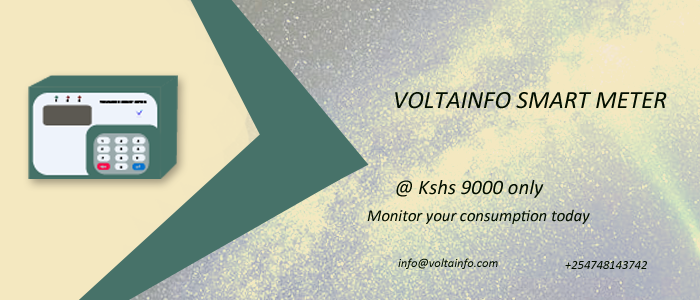
<style>
.page{position:relative;width:700px;height:300px;background:#f4e8c0}
.page>*{position:absolute;margin:0}
.t1{font:25px "Calibri-Italic";color:#030f00}
.t2{font:20.8px "Calibri-Italic";color:#030f00}
.t3{font:16.7px "Calibri-Italic";color:#030f00}
.t4{font:12.5px "Calibri-Italic";color:#030f00}
</style>
<div class="page">
<p class="t1" style="left:395px;top:92px;width:272px;height:17px">VOLTAINFO SMART METER</p>
<p class="t2" style="left:396px;top:180px;width:148px;height:18px">@ Kshs 9000 only</p>
<p class="t3" style="left:367px;top:209px;width:223px;height:15px">Monitor your consumption today</p>
<p class="t4" style="left:398px;top:258px;width:100px;height:11px">info@voltainfo.com</p>
<p class="t4" style="left:565px;top:261px;width:82px;height:8px">+254748143742</p>
</div>
